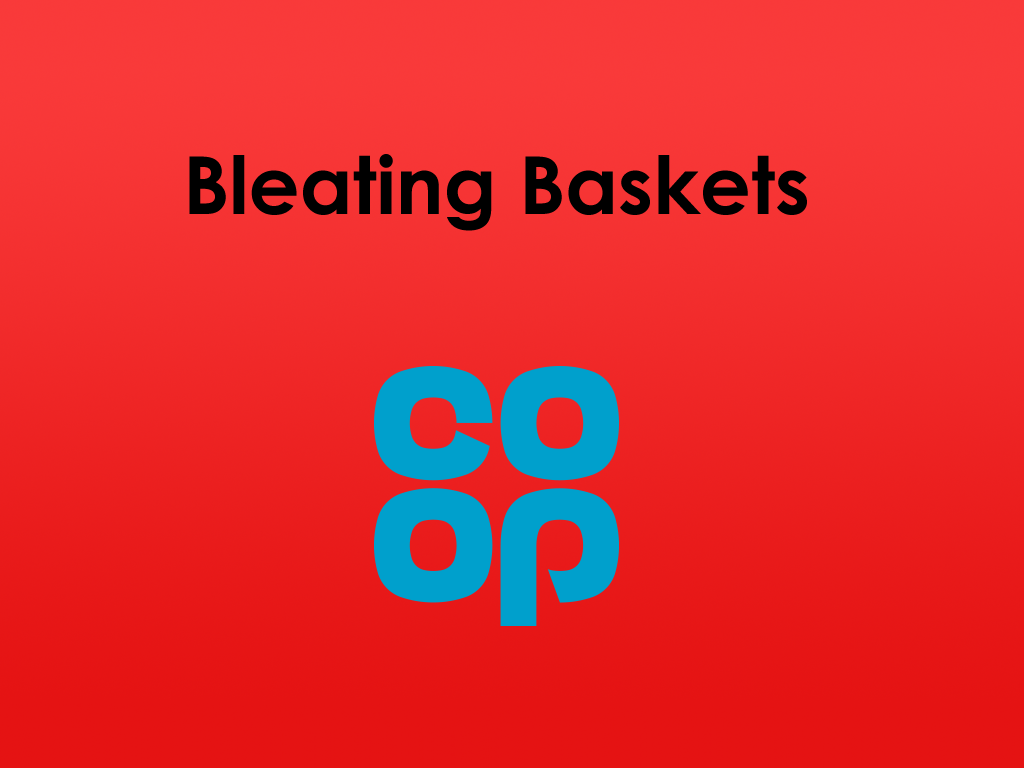
<style>
.page{position:relative;width:1024px;height:768px}
.page>*{position:absolute;margin:0}
.t1{font:80px "CenturyGothic-Bold";color:#000000}
</style>
<div class="page">
<p class="t1" style="left:189px;top:154px;width:618px;height:77px">Bleating Baskets</p>
</div>
